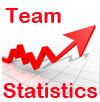
<style>
.page{position:relative;width:100px;height:102px;background:#ffffff}
.page>*{position:absolute;margin:0}
.t1{font:21px "ArialRoundedMTBold";color:#fd0315}
</style>
<div class="page">
<p class="t1" style="left:5px;top:8px;width:56px;height:15px">Team</p>
<p class="t1" style="left:3px;top:83px;width:94px;height:15px">Statistics</p>
</div>
